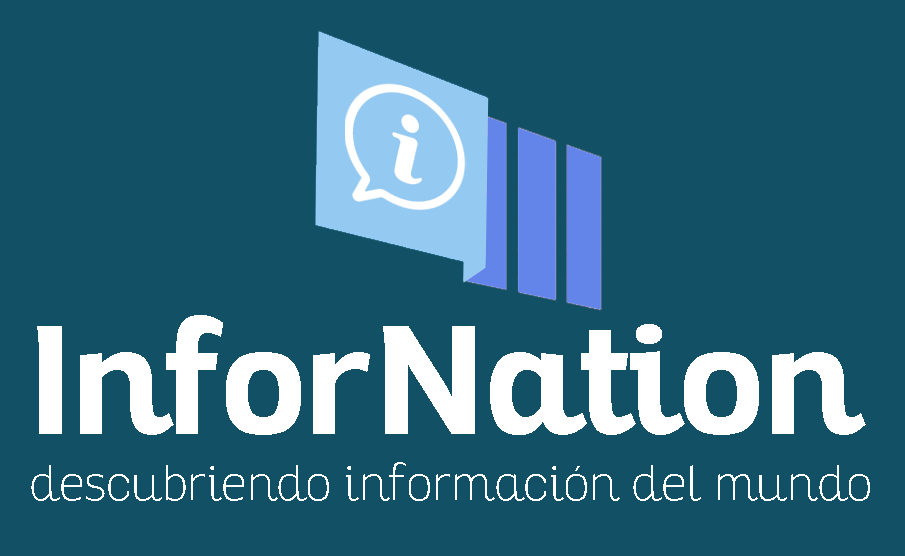
<style>
.page{position:relative;width:905px;height:556px;background:#125065}
.page>*{position:absolute;margin:0}
.t1{font:150px "Altair-Bold";color:#ffffff}
.t2{font:47.5px "Altair-Thin";color:#ffffff}
</style>
<div class="page">
<p class="t1" style="left:37px;top:315px;width:829px;height:120px">InforNation</p>
<p class="t2" style="left:31px;top:462px;width:839px;height:39px">descubriendo información del mundo</p>
</div>
